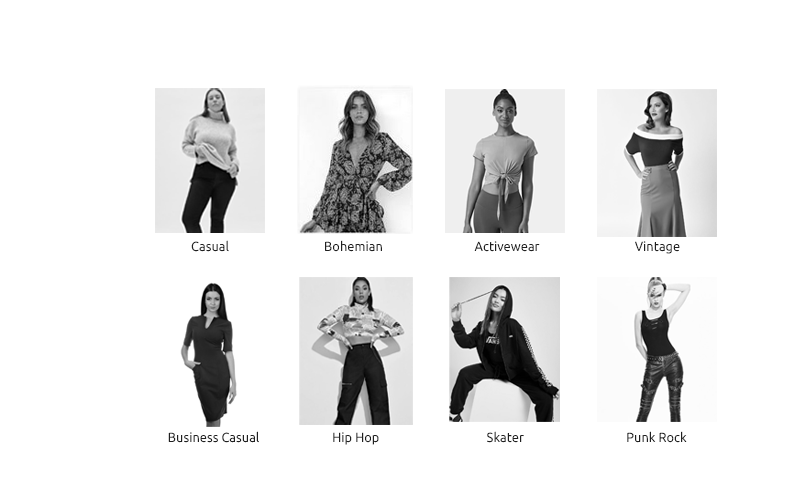
<style>
.page{position:relative;width:800px;height:491px;background:#ffffff}
.page>*{position:absolute;margin:0}
.t1{font:13.2px "Ubuntu-Regular";color:#202020}
</style>
<div class="page">
<p class="t1" style="left:191px;top:240px;width:38px;height:12px">Casual</p>
<p class="t1" style="left:325px;top:240px;width:57px;height:12px">Bohemian</p>
<p class="t1" style="left:474px;top:241px;width:66px;height:11px">Activewear</p>
<p class="t1" style="left:635px;top:241px;width:45px;height:13px">Vintage</p>
<p class="t1" style="left:168px;top:431px;width:91px;height:12px">Business Casual</p>
<p class="t1" style="left:333px;top:432px;width:46px;height:13px">Hip Hop</p>
<p class="t1" style="left:487px;top:431px;width:37px;height:12px">Skater</p>
<p class="t1" style="left:627px;top:431px;width:60px;height:12px">Punk Rock</p>
</div>
